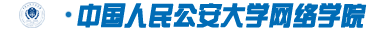
<style>
.page{position:relative;width:370px;height:30px;background:#ffffff}
.page>*{position:absolute;margin:0}
.t1{font:26px "FZZYJW--GB1-0";color:#006cb6;font-weight:bold;font-style:italic;scale:0.9 1}
</style>
<div class="page">
<p class="t1" style="left:77px;top:3px;width:290px;height:25px">中国人民公安大学网络学院</p>
</div>
